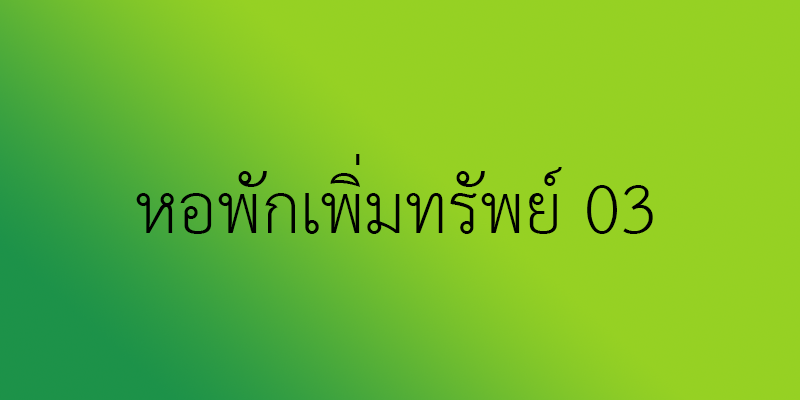
<style>
.page{position:relative;width:800px;height:400px;background:#96d123}
.page>*{position:absolute;margin:0}
.t1{font:100px "THSarabunNew";color:#000000}
</style>
<div class="page">
<p class="t1" style="left:136px;top:154px;width:517px;height:80px">หอพักเพิ่มทรัพย์ 03</p>
</div>
